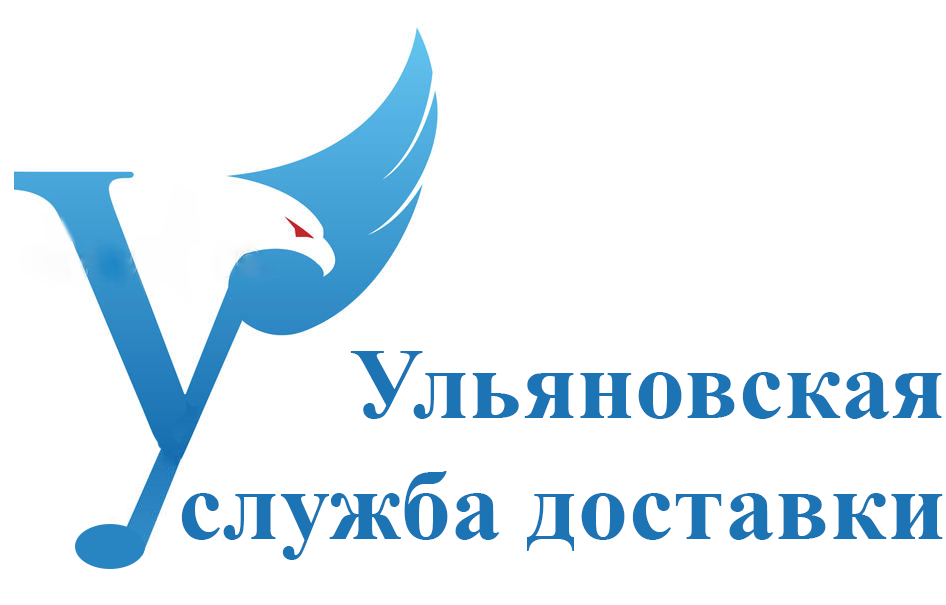
<style>
.page{position:relative;width:946px;height:605px;background:#ffffff}
.page>*{position:absolute;margin:0}
.t1{font:100px/121px "TimesNewRomanPS-BoldMT";letter-spacing:0.005em;color:#1c74b4}
</style>
<div class="page">
<p class="t1" style="left:181px;top:351px;width:762px;height:209px;text-align:right">Ульяновская<br>служба доставки</p>
</div>
